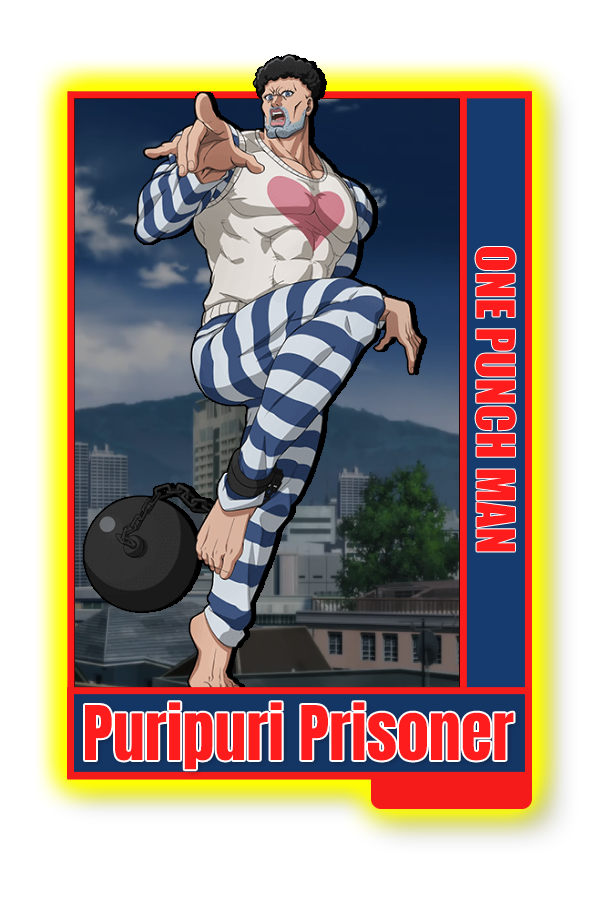
<style>
.page{position:relative;width:600px;height:900px;background:#ffffff}
.page>*{position:absolute;margin:0}
.t1{font:48.8px "Impact";color:#ff1c1c}
.t2{font:64px "Impact";color:#ff1c1c}
</style>
<div class="page">
<p class="t1" style="left:475px;top:246px;width:41px;height:306px;rotate:90deg">ONE PUNCH MAN</p>
<p class="t2" style="left:85px;top:702px;width:429px;height:68px">Puripuri Prisoner</p>
</div>
